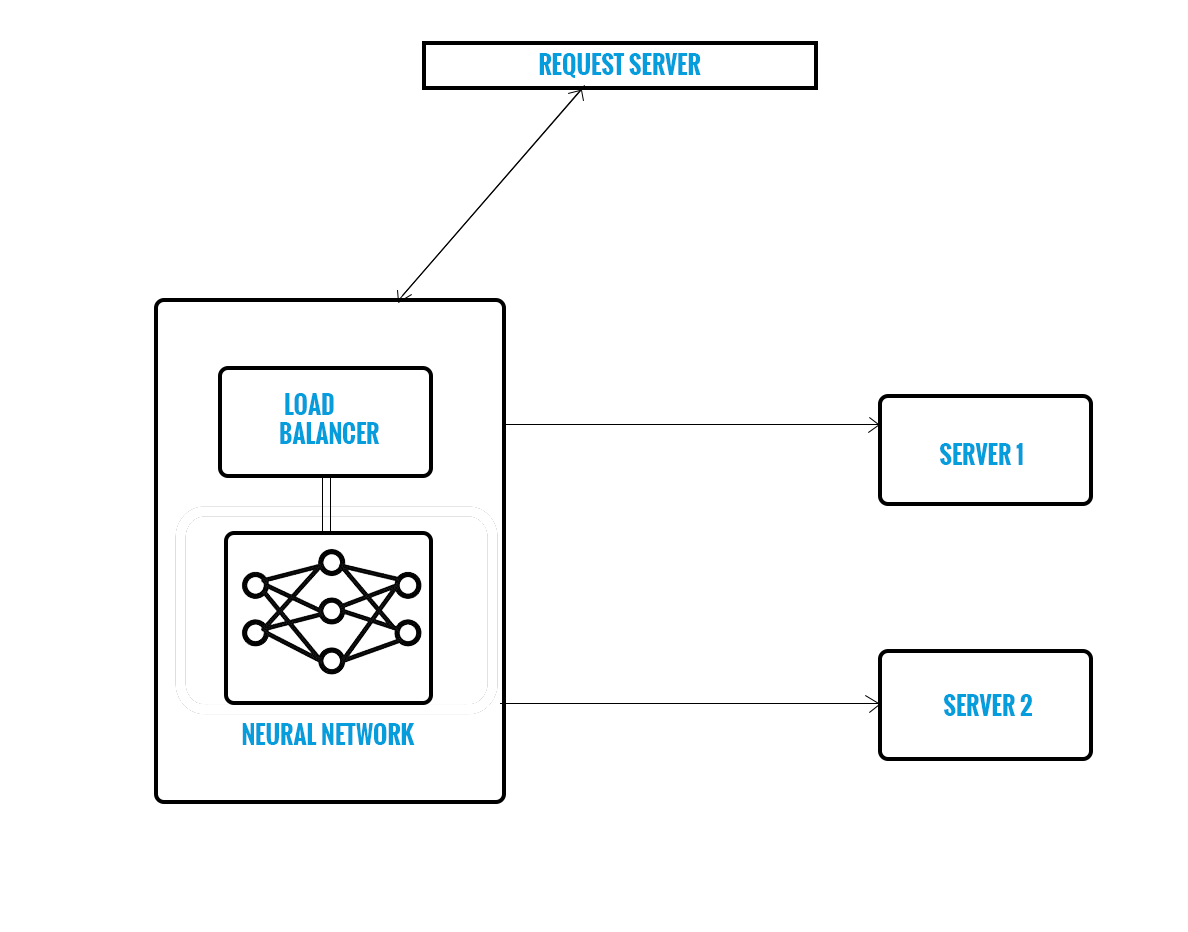
<style>
.page{position:relative;width:1188px;height:932px;background:#ffffff}
.page>*{position:absolute;margin:0}
.t1{font:24px "Oswald-Bold";color:#069ddc;text-transform:uppercase}
</style>
<div class="page">
<p class="t1" style="left:539px;top:53px;width:162px;height:25px">Request Server</p>
<p class="t1" style="left:280px;top:393px;width:100px;height:51px;text-align:right">Load <br>Balancer</p>
<p class="t1" style="left:940px;top:443px;width:83px;height:22px">Server 1</p>
<p class="t1" style="left:944px;top:694px;width:88px;height:22px">Server 2</p>
<p class="t1" style="left:242px;top:723px;width:173px;height:22px">neural Network</p>
</div>
